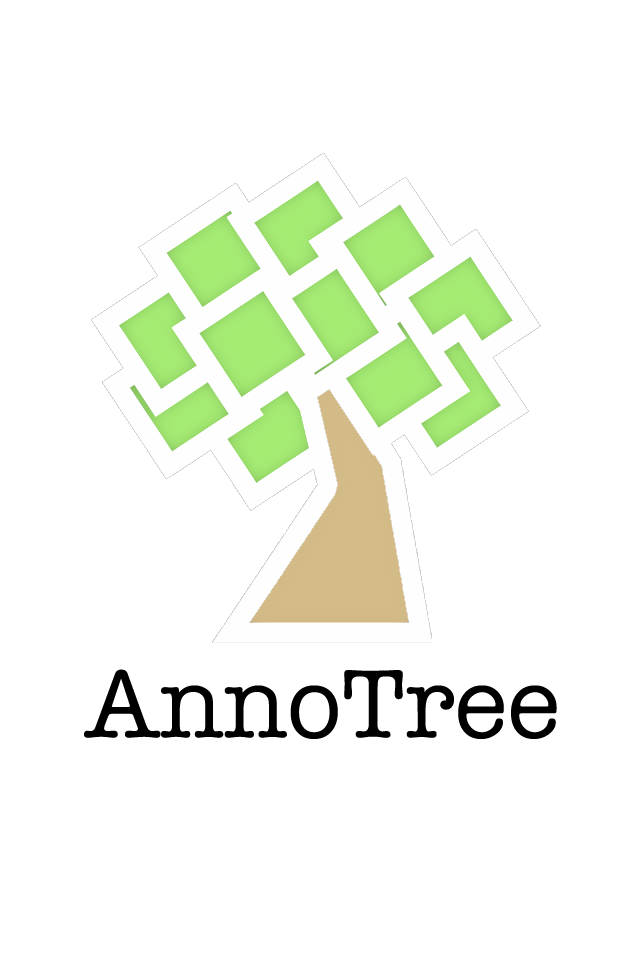
<style>
.page{position:relative;width:640px;height:960px;background:#ffffff}
.page>*{position:absolute;margin:0}
.t1{font:100px "AmericanTypewriter";color:#000000}
</style>
<div class="page">
<p class="t1" style="left:84px;top:669px;width:473px;height:70px">AnnoTree</p>
</div>
